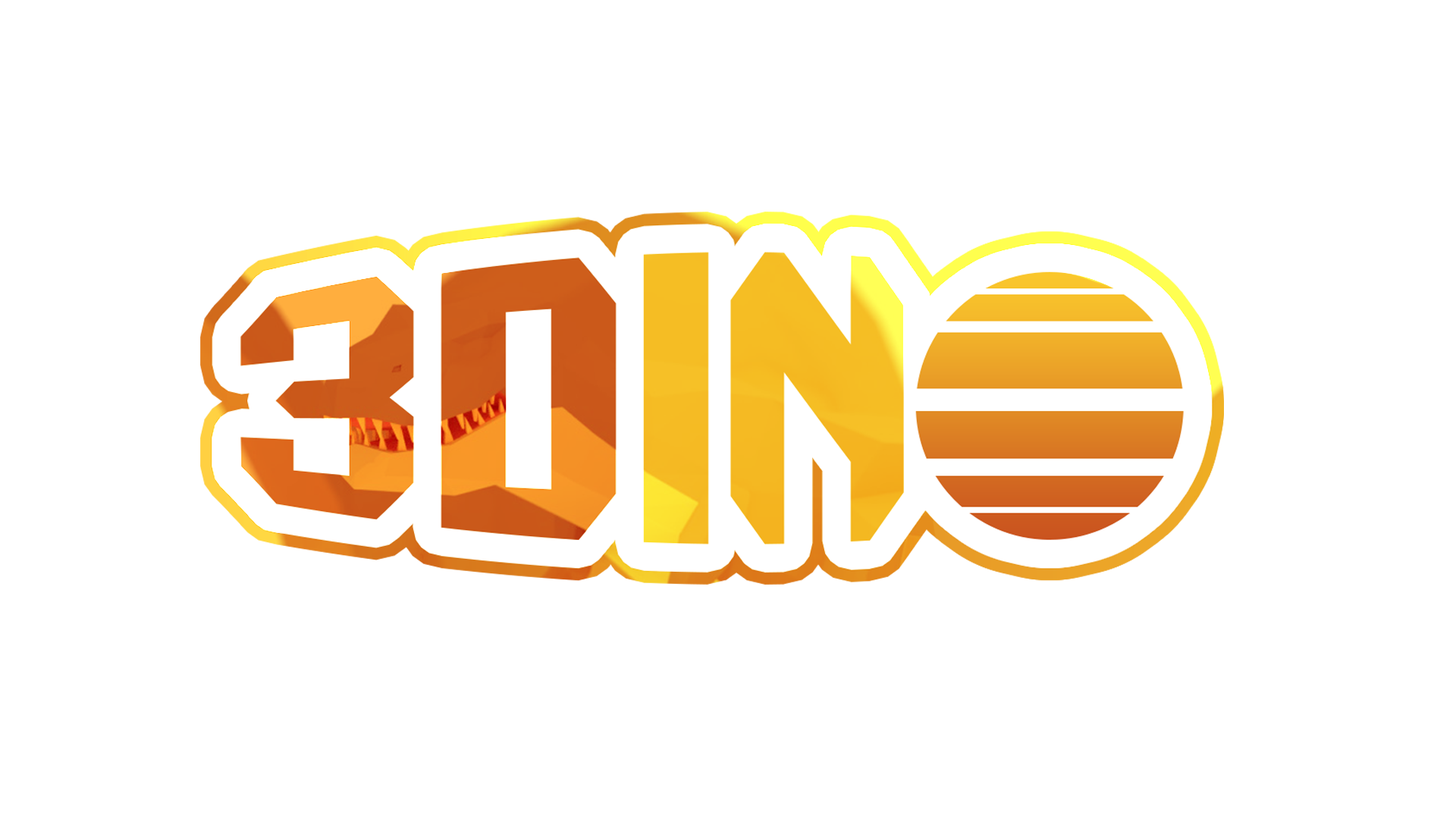
<style>
.page{position:relative;width:1456px;height:819px;background:#ffffff}
.page>*{position:absolute;margin:0}
.t1{font:333.1px "SendBox-Regular";color:#cb571f}
.t2{font:333.1px "SendBox-Regular";color:#f5bb2b}
</style>
<div class="page">
<p class="t1" style="left:240px;top:252px;width:664px;height:292px">3D<span class="t2">in</span></p>
</div>
